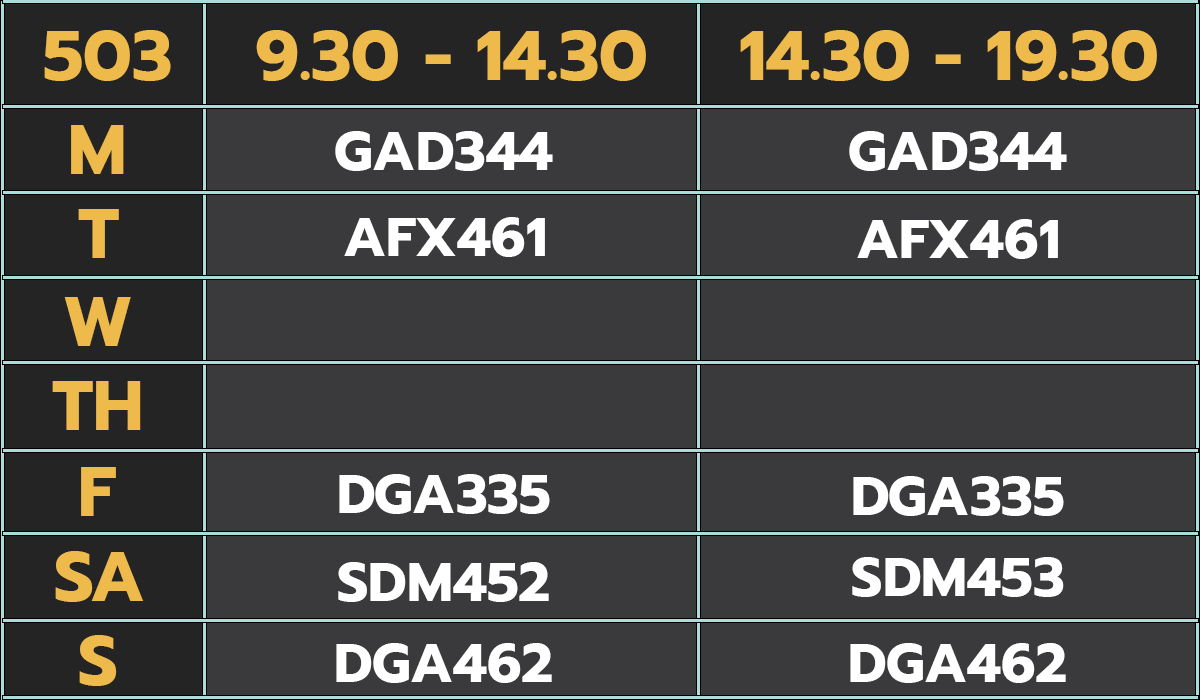
<style>
.page{position:relative;width:1200px;height:700px;background:#3a3a3c}
.page>*{position:absolute;margin:0}
.t1{font:70px "Prompt-Bold";color:#eeba4c}
.t2{font:55px "Prompt-Bold";color:#ffffff}
</style>
<div class="page">
<p class="t1" style="left:44px;top:30px;width:127px;height:51px">503</p>
<p class="t1" style="left:256px;top:30px;width:390px;height:51px">9.30 - 14.30</p>
<p class="t1" style="left:740px;top:30px;width:417px;height:51px">14.30 - 19.30</p>
<p class="t1" style="left:71px;top:125px;width:53px;height:49px">M</p>
<p class="t2" style="left:335px;top:131px;width:218px;height:40px">GAD344</p>
<p class="t2" style="left:849px;top:131px;width:218px;height:40px">GAD344</p>
<p class="t1" style="left:78px;top:209px;width:41px;height:49px">T</p>
<p class="t2" style="left:344px;top:217px;width:201px;height:40px">AFX461</p>
<p class="t2" style="left:857px;top:219px;width:201px;height:40px">AFX461</p>
<p class="t1" style="left:64px;top:297px;width:67px;height:49px">W</p>
<p class="t1" style="left:52px;top:381px;width:89px;height:49px">TH</p>
<p class="t1" style="left:81px;top:467px;width:35px;height:49px">F</p>
<p class="t2" style="left:339px;top:474px;width:211px;height:40px">DGA335</p>
<p class="t2" style="left:853px;top:476px;width:211px;height:40px">DGA335</p>
<p class="t1" style="left:55px;top:551px;width:89px;height:51px">SA</p>
<p class="t2" style="left:852px;top:557px;width:212px;height:40px">SDM453</p>
<p class="t2" style="left:338px;top:562px;width:211px;height:40px">SDM452</p>
<p class="t1" style="left:79px;top:635px;width:38px;height:51px">S</p>
<p class="t2" style="left:336px;top:643px;width:216px;height:40px">DGA462</p>
<p class="t2" style="left:850px;top:643px;width:216px;height:40px">DGA462</p>
</div>
